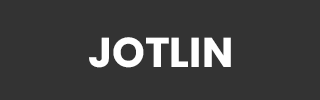
<style>
.page{position:relative;width:320px;height:100px;background:#333333}
.page>*{position:absolute;margin:0}
.t1{font:41.7px "Poppins-Bold";color:#ffffff}
</style>
<div class="page">
<p class="t1" style="left:89px;top:37px;width:142px;height:31px">JOTLIN</p>
</div>
